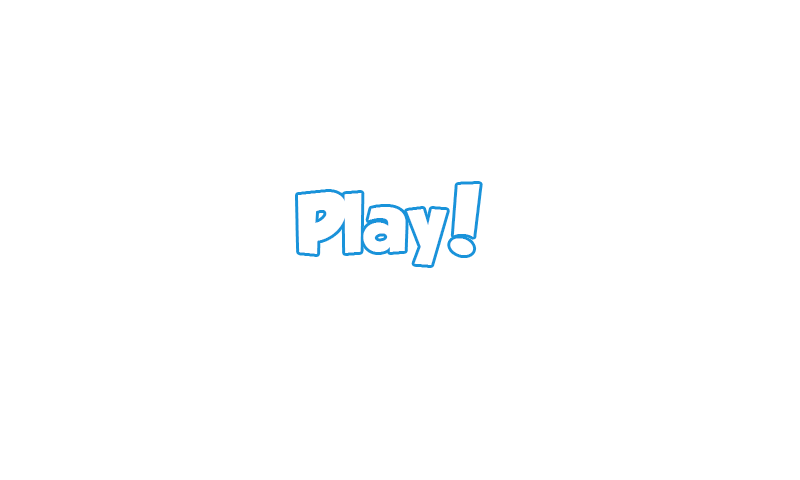
<style>
.page{position:relative;width:800px;height:480px;background:#ffffff}
.page>*{position:absolute;margin:0}
.t1{font:73.2px "GROBOLD";color:#ffffff}
.t2{font:73.2px "GROBOLD";letter-spacing:-0.24em;color:#ffffff}
</style>
<div class="page">
<p class="t1" style="left:298px;top:184px;width:182px;height:81px">Pla<span class="t2">y!</span></p>
</div>
